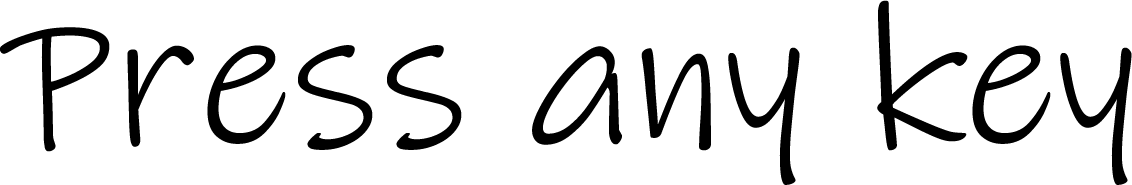
<style>
.page{position:relative;width:1132px;height:185px;background:#ffffff}
.page>*{position:absolute;margin:0}
.t1{font:200px "InkFree";color:#000000}
</style>
<div class="page">
<p class="t1" style="left:0px;top:0px;width:1132px;height:185px">Press any key</p>
</div>
